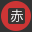
<style>
.page{position:relative;width:32px;height:32px;background:#ce3535}
.page>*{position:absolute;margin:0}
.t1{font:13.8px "HiraKakuPro-W3";letter-spacing:0.03em;color:#ffffff}
</style>
<div class="page">
<p class="t1" style="left:10px;top:9px;width:13px;height:13px">赤</p>
</div>
